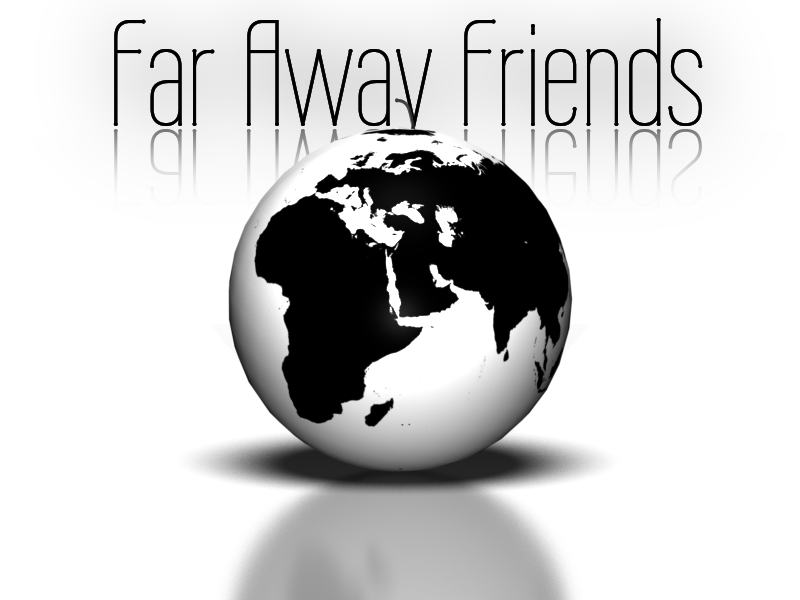
<style>
.page{position:relative;width:800px;height:600px;background:#ffffff}
.page>*{position:absolute;margin:0}
.t1{font:150px "WireOne";color:#000000}
</style>
<div class="page">
<p class="t1" style="left:113px;top:18px;width:590px;height:139px">Far Away Friends</p>
</div>
